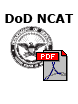
<style>
.page{position:relative;width:78px;height:104px;background:#ffffff}
.page>*{position:absolute;margin:0}
.t1{font:12px "Verdana-Bold";color:#000000}
</style>
<div class="page">
<p class="t1" style="left:5px;top:14px;width:69px;height:9px">DoD NCAT</p>
</div>
